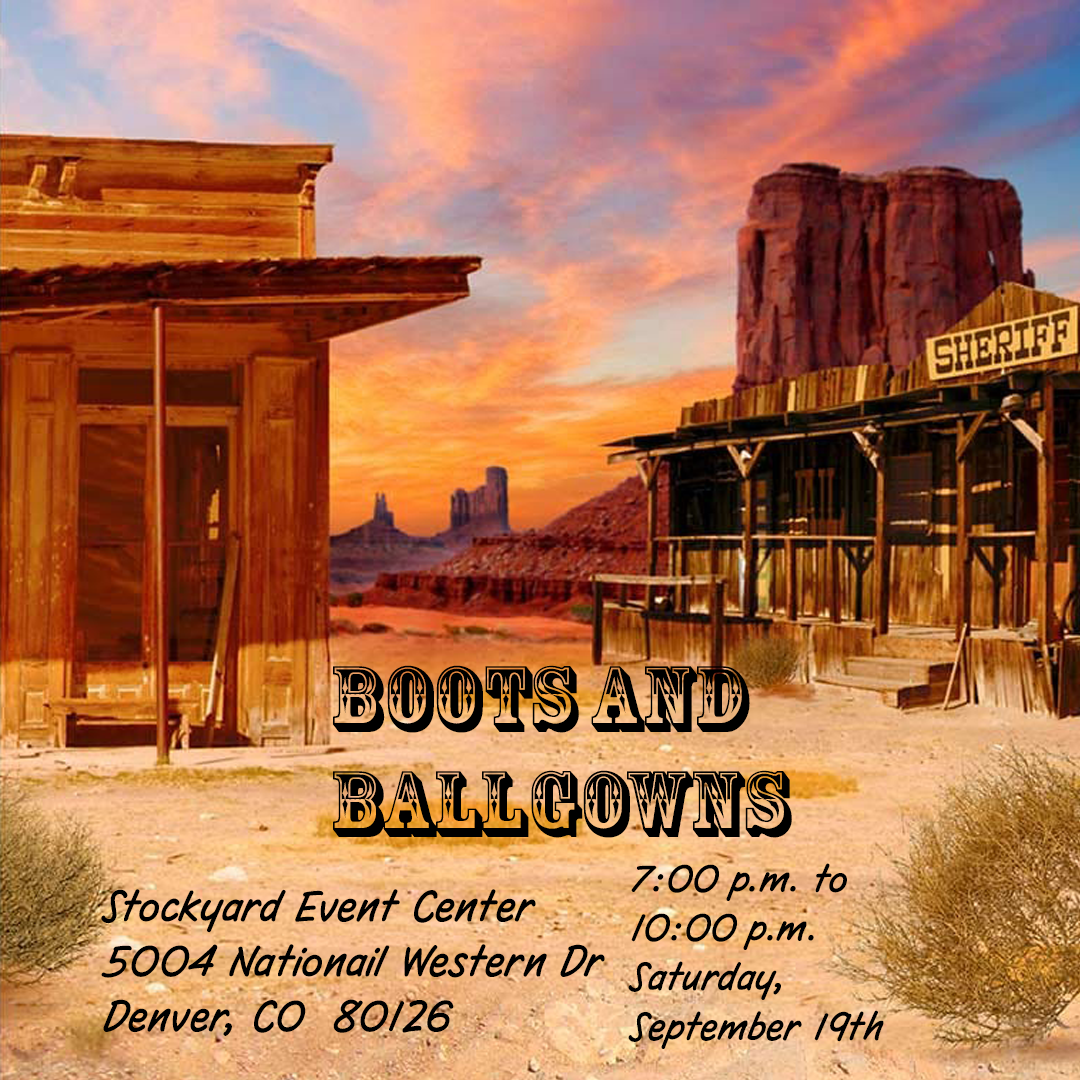
<style>
.page{position:relative;width:1080px;height:1080px}
.page>*{position:absolute;margin:0}
.t1{font:87.5px "RosewoodStd-Regular";color:#000000}
.t2{font:41.1px "CCSpaghettiWestern-Sans";color:#000000}
.t3{font:45.8px "CCSpaghettiWestern-Sans";color:#000000}
</style>
<div class="page">
<p class="t1" style="left:333px;top:665px;width:459px;height:173px">BOOts and ballgowns</p>
<p class="t2" style="left:628px;top:863px;width:256px;height:186px">7:00 p.m. to 10:00 p.m.<br>Saturday, September 19th</p>
<p class="t3" style="left:101px;top:889px;width:504px;height:147px">Stockyard Event Center<br>5004 Nationail Western Dr<br>Denver, CO  80126</p>
</div>
